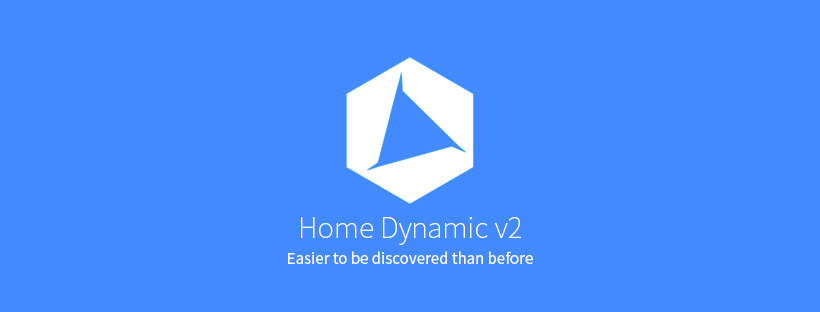
<style>
.page{position:relative;width:820px;height:312px;background:#448aff}
.page>*{position:absolute;margin:0}
.t1{font:28px "NotoSansCJKtc-Thin";color:#ffffff}
.t2{font:15px "NotoSansCJKtc-Regular";color:#ffffff}
</style>
<div class="page">
<p class="t1" style="left:301px;top:217px;width:220px;height:28px">Home Dynamic v2</p>
<p class="t2" style="left:288px;top:251px;width:245px;height:13px">Easier to be discovered than before</p>
</div>
